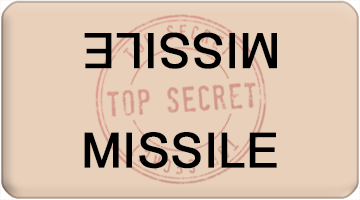
<style>
.page{position:relative;width:360px;height:200px;background:#e8d0bb}
.page>*{position:absolute;margin:0}
.t1{font:48px "ArialMT";color:#000000;font-weight:bold}
</style>
<div class="page">
<p class="t1" style="left:84px;top:32px;width:193px;height:37px;rotate:180deg">MISSILE</p>
<p class="t1" style="left:84px;top:132px;width:193px;height:37px">MISSILE</p>
</div>
